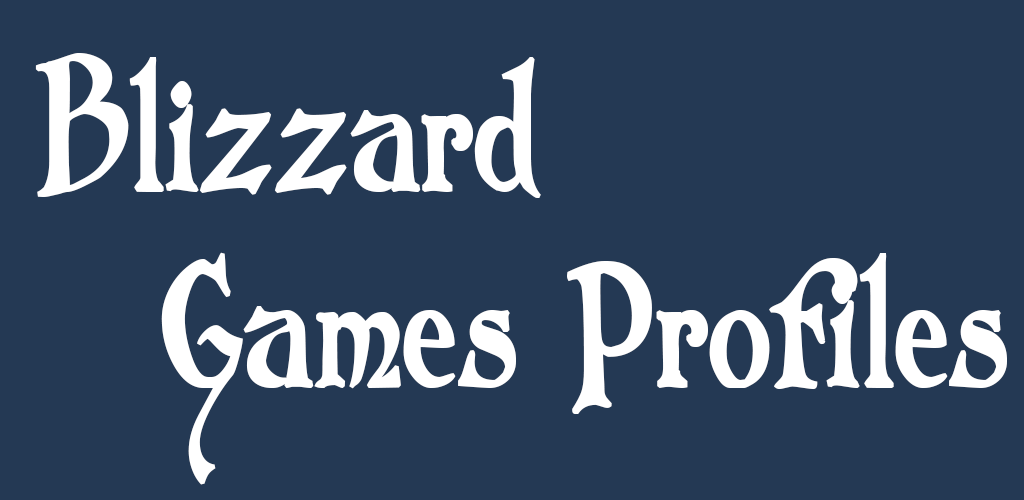
<style>
.page{position:relative;width:1024px;height:500px;background:#243954}
.page>*{position:absolute;margin:0}
.t1{font:175px "Folkard";color:#ffffff;font-weight:bold;scale:0.71 1}
</style>
<div class="page">
<p class="t1" style="left:35px;top:53px;width:506px;height:145px">Blizzard</p>
<p class="t1" style="left:161px;top:252px;width:846px;height:233px">Games Profiles</p>
</div>
